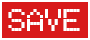
<style>
.page{position:relative;width:90px;height:40px;background:#d81a1a}
.page>*{position:absolute;margin:0}
.t1{font:30px "ElectronicHighwaySign";color:#ffffff}
</style>
<div class="page">
<p class="t1" style="left:8px;top:9px;width:72px;height:22px">SAVE</p>
</div>
